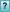
<style>
.page{position:relative;width:10px;height:12px;background:#50b0b0}
.page>*{position:absolute;margin:0}
.t1{font:8px "MicrosoftSansSerif";color:#0a0d0d}
</style>
<div class="page">
<p class="t1" style="left:3px;top:2px;width:4px;height:7px">?</p>
</div>
